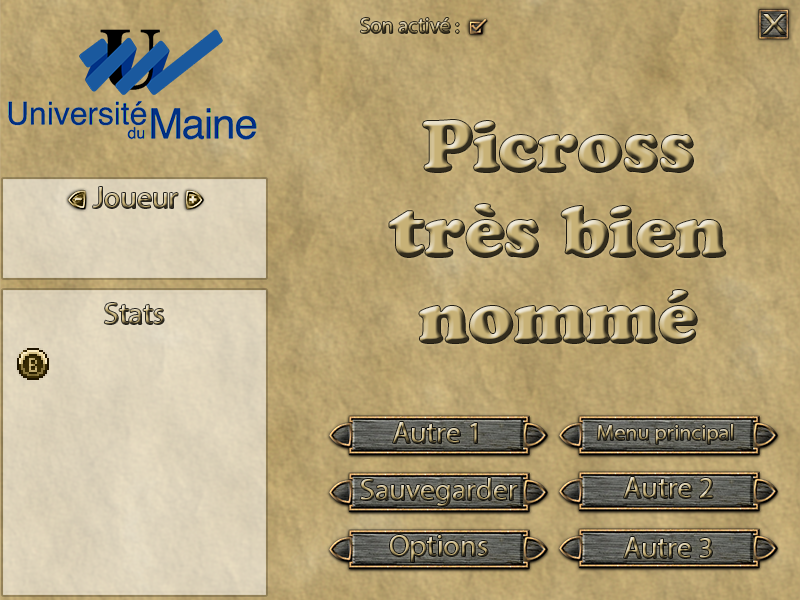
<style>
.page{position:relative;width:800px;height:600px}
.page>*{position:absolute;margin:0}
.t1{font:28.5px "MyriadPro-Regular";scale:1.54 1}
.t2{font:30px "MyriadPro-Regular"}
.t3{font:22px "MyriadPro-Regular"}
</style>
<div class="page">
<p class="t1" style="left:763px;top:14px;width:23px;height:20px">X</p>
<p class="t2" style="left:93px;top:187px;width:85px;height:21px">Joueur</p>
<p class="t2" style="left:104px;top:303px;width:60px;height:21px">Stats</p>
<p class="t2" style="left:393px;top:422px;width:84px;height:21px">Autre 1</p>
<p class="t3" style="left:597px;top:424px;width:137px;height:20px">Menu principal</p>
<p class="t2" style="left:360px;top:478px;width:158px;height:28px">Sauvegarder</p>
<p class="t2" style="left:624px;top:477px;width:89px;height:21px">Autre 2</p>
<p class="t2" style="left:390px;top:535px;width:98px;height:27px">Options</p>
<p class="t2" style="left:624px;top:537px;width:88px;height:21px">Autre 3</p>
</div>
